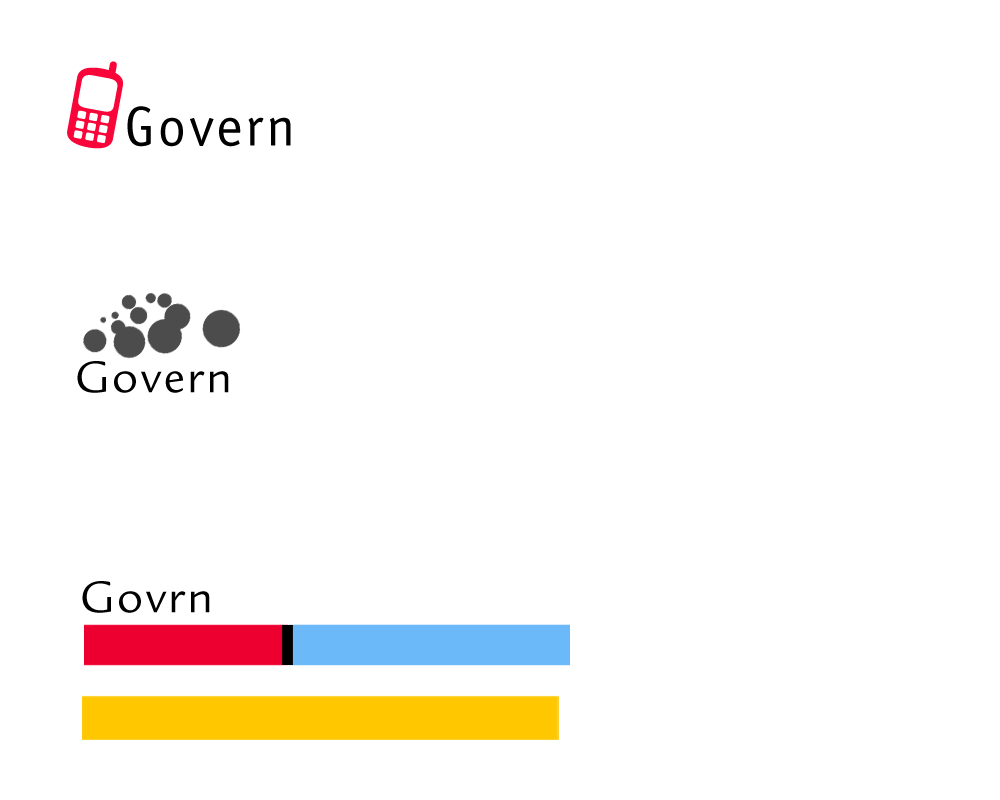
<style>
.page{position:relative;width:1000px;height:800px;background:#ffffff}
.page>*{position:absolute;margin:0}
.t1{font:56.4px "OfficinaSansStd-Book";letter-spacing:0.05em;color:#000000}
.t2{font:48.6px "LegacySansStd-Book";letter-spacing:0.05em;color:#000000}
</style>
<div class="page">
<p class="t1" style="left:127px;top:106px;width:164px;height:41px">Govern</p>
<p class="t2" style="left:77px;top:361px;width:152px;height:32px">Govern</p>
<p class="t2" style="left:82px;top:581px;width:128px;height:32px">Govrn</p>
</div>
